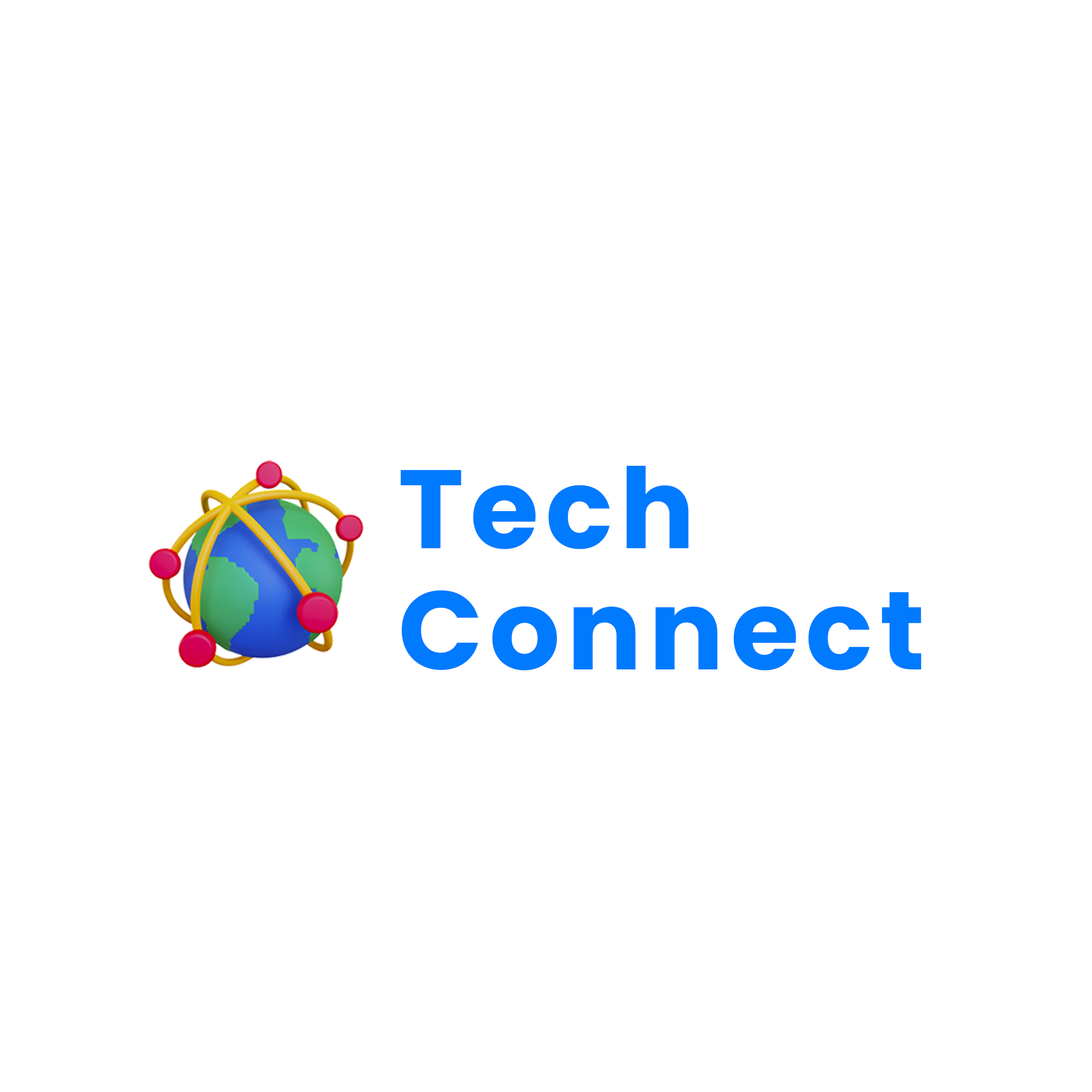
<style>
.page{position:relative;width:1092px;height:1092px;background:#ffffff}
.page>*{position:absolute;margin:0}
.t1{font:111.3px "Poppins-Bold";letter-spacing:0.06em;color:#007aff}
</style>
<div class="page">
<p class="t1" style="left:400px;top:466px;width:288px;height:83px">Tech</p>
<p class="t1" style="left:401px;top:590px;width:521px;height:80px">Connect</p>
</div>
